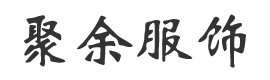
<style>
.page{position:relative;width:270px;height:80px;background:#ffffff}
.page>*{position:absolute;margin:0}
.t1{font:60px "STXinwei";color:#333333}
</style>
<div class="page">
<p class="t1" style="left:24px;top:14px;width:222px;height:54px">聚余服饰</p>
</div>
